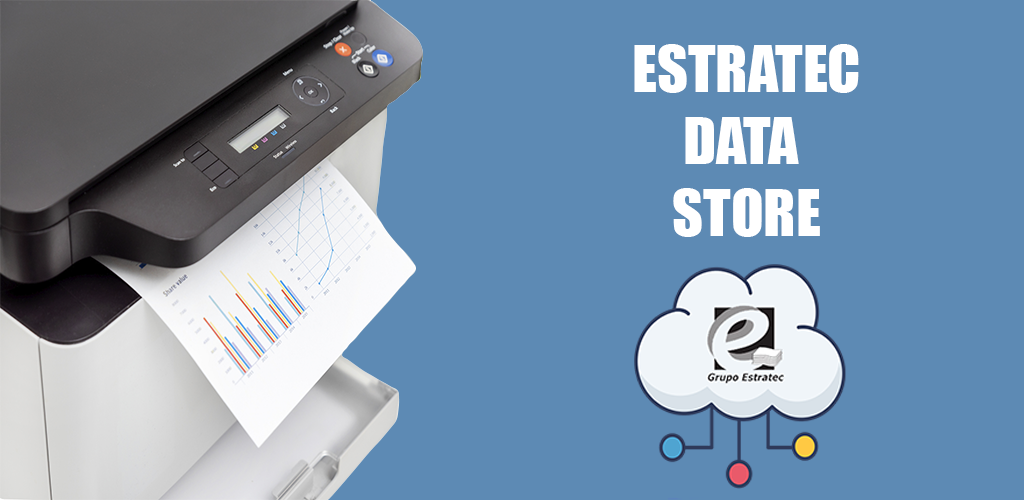
<style>
.page{position:relative;width:1024px;height:500px;background:#5d8ab4}
.page>*{position:absolute;margin:0}
.t1{font:60px "Impact";color:#ffffff}
</style>
<div class="page">
<p class="t1" style="left:634px;top:44px;width:225px;height:193px;text-align:center">ESTRATEC<br>DATA <br>STORE</p>
</div>
